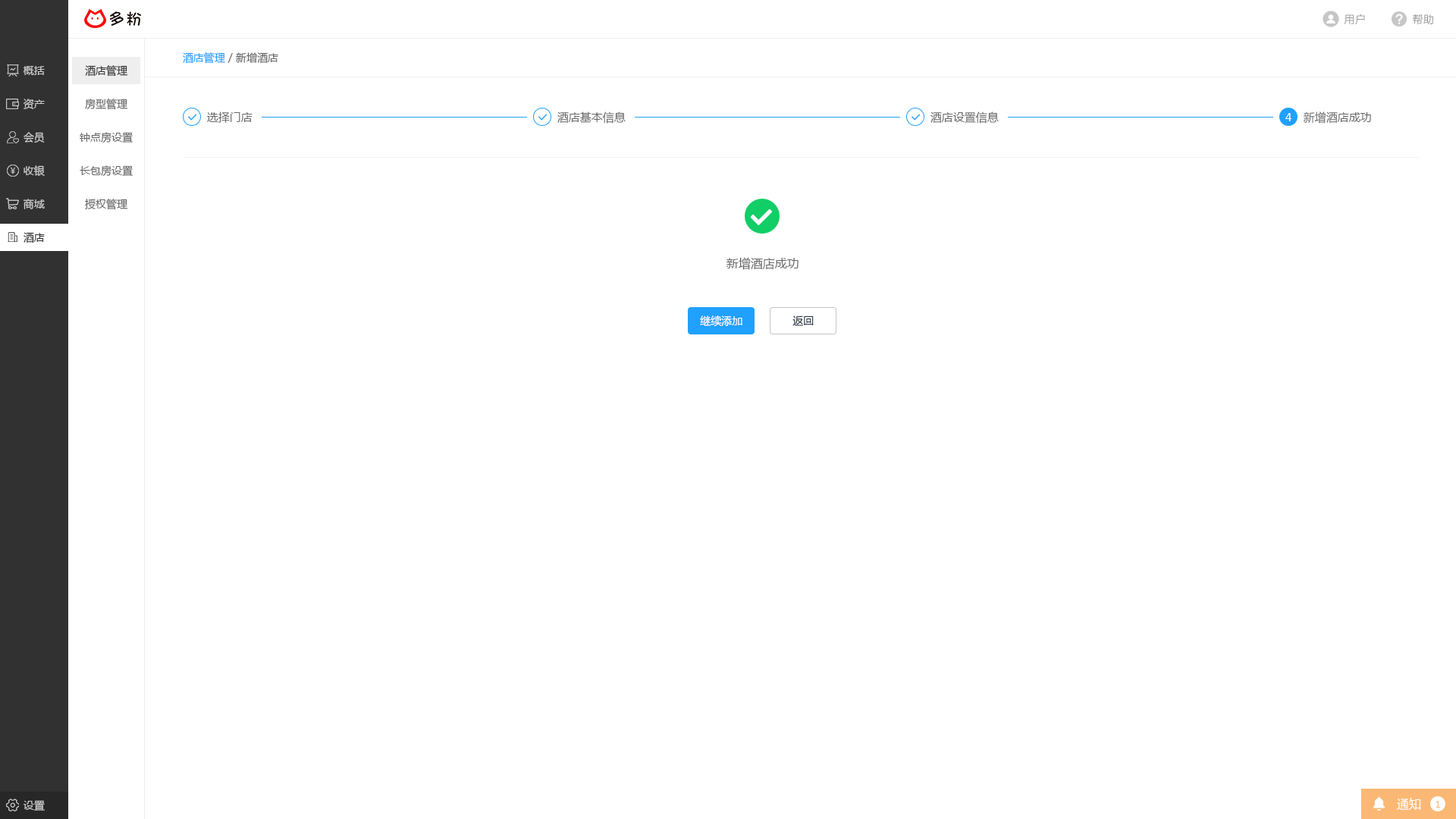
<style>
.page{position:relative;width:1456px;height:819px;background:#ffffff}
.page>*{position:absolute;margin:0}
.t1{font:10.6px "MicrosoftYaHei";letter-spacing:0.025em;color:#999999}
.t2{font:10.6px "MicrosoftYaHei";color:#666666}
.t3{font:10.6px "MicrosoftYaHei";color:#20a0ff}
.t4{font:10.6px "MicrosoftYaHei";color:#cccccc}
.t5{font:10.6px "MicrosoftYaHei";color:#333333}
.t6{font:11.4px "MicrosoftYaHei";color:#666666}
.t7{font:10.6px "MicrosoftYaHei";color:#ffffff}
.t8{font:10.6px "MicrosoftYaHei";color:#313131}
.t9{font:12.1px "MicrosoftYaHei";color:#666666}
.t10{font:10.6px "MicrosoftYaHei";color:#1f2d3d}
.t11{font:12.1px "MicrosoftYaHei";color:#ffffff}
.t12{font:9.1px "MicrosoftYaHei";color:#fbb875}
</style>
<div class="page">
<p class="t1" style="left:1344px;top:14px;width:21px;height:11px">用户</p>
<p class="t1" style="left:1413px;top:14px;width:20px;height:11px">帮助</p>
<p class="t2" style="left:183px;top:52px;width:95px;height:12px"><span class="t3">酒店管理</span> / 新增酒店</p>
<p class="t4" style="left:23px;top:66px;width:22px;height:9px">概括</p>
<p class="t5" style="left:85px;top:65px;width:42px;height:12px">酒店管理</p>
<p class="t4" style="left:24px;top:99px;width:21px;height:10px">资产</p>
<p class="t2" style="left:85px;top:99px;width:42px;height:11px">房型管理</p>
<p class="t6" style="left:207px;top:111px;width:46px;height:12px">选择门店</p>
<p class="t6" style="left:557px;top:111px;width:69px;height:13px">酒店基本信息</p>
<p class="t6" style="left:930px;top:111px;width:69px;height:13px">酒店设置信息</p>
<p class="t7" style="left:1285px;top:113px;width:6px;height:8px">4</p>
<p class="t6" style="left:1304px;top:111px;width:67px;height:13px">新增酒店成功</p>
<p class="t4" style="left:24px;top:132px;width:21px;height:11px">会员</p>
<p class="t2" style="left:80px;top:132px;width:53px;height:11px">钟点房设置</p>
<p class="t4" style="left:24px;top:165px;width:21px;height:11px">收银</p>
<p class="t2" style="left:80px;top:165px;width:53px;height:12px">长包房设置</p>
<p class="t4" style="left:23px;top:199px;width:22px;height:10px">商城</p>
<p class="t2" style="left:85px;top:199px;width:42px;height:11px">授权管理</p>
<p class="t8" style="left:24px;top:232px;width:21px;height:11px">酒店</p>
<p class="t9" style="left:726px;top:257px;width:73px;height:13px">新增酒店成功</p>
<p class="t7" style="left:700px;top:315px;width:42px;height:12px">继续添加</p>
<p class="t10" style="left:792px;top:315px;width:22px;height:11px">返回</p>
<p class="t11" style="left:1397px;top:798px;width:24px;height:12px">通知</p>
<p class="t4" style="left:23px;top:800px;width:22px;height:11px">设置</p>
<p class="t12" style="left:1436px;top:801px;width:5px;height:7px">1</p>
</div>
